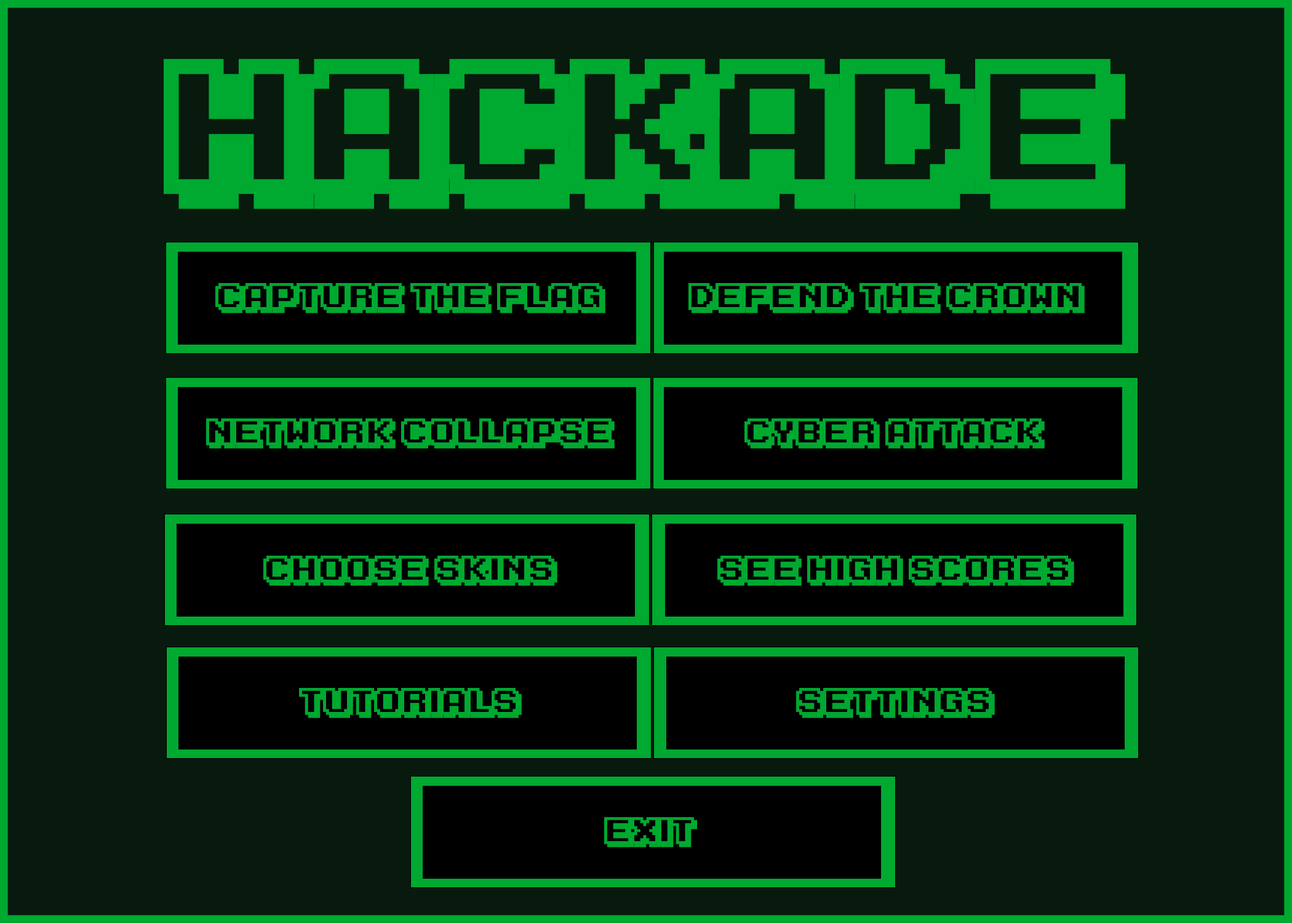
<style>
.page{position:relative;width:1292px;height:923px;background:#08190d}
.page>*{position:absolute;margin:0}
.t1{font:153.8px "KarmaticArcade";color:#00a930}
.t2{font:30.8px "KarmaticArcade";color:#00a930}
</style>
<div class="page">
<p class="t1" style="left:164px;top:58px;width:961px;height:151px">HACKade</p>
<p class="t2" style="left:215px;top:283px;width:390px;height:30px">Capture the Flag</p>
<p class="t2" style="left:688px;top:283px;width:397px;height:30px">Defend the Crown</p>
<p class="t2" style="left:206px;top:418px;width:409px;height:31px">Network CollaPse</p>
<p class="t2" style="left:744px;top:418px;width:301px;height:31px">Cyber Attack</p>
<p class="t2" style="left:263px;top:556px;width:294px;height:30px">Choose Skins</p>
<p class="t2" style="left:717px;top:556px;width:357px;height:30px">See High Scores</p>
<p class="t2" style="left:299px;top:688px;width:223px;height:30px">Tutorials</p>
<p class="t2" style="left:796px;top:688px;width:199px;height:30px">Settings</p>
<p class="t2" style="left:604px;top:817px;width:93px;height:30px">exit</p>
</div>
